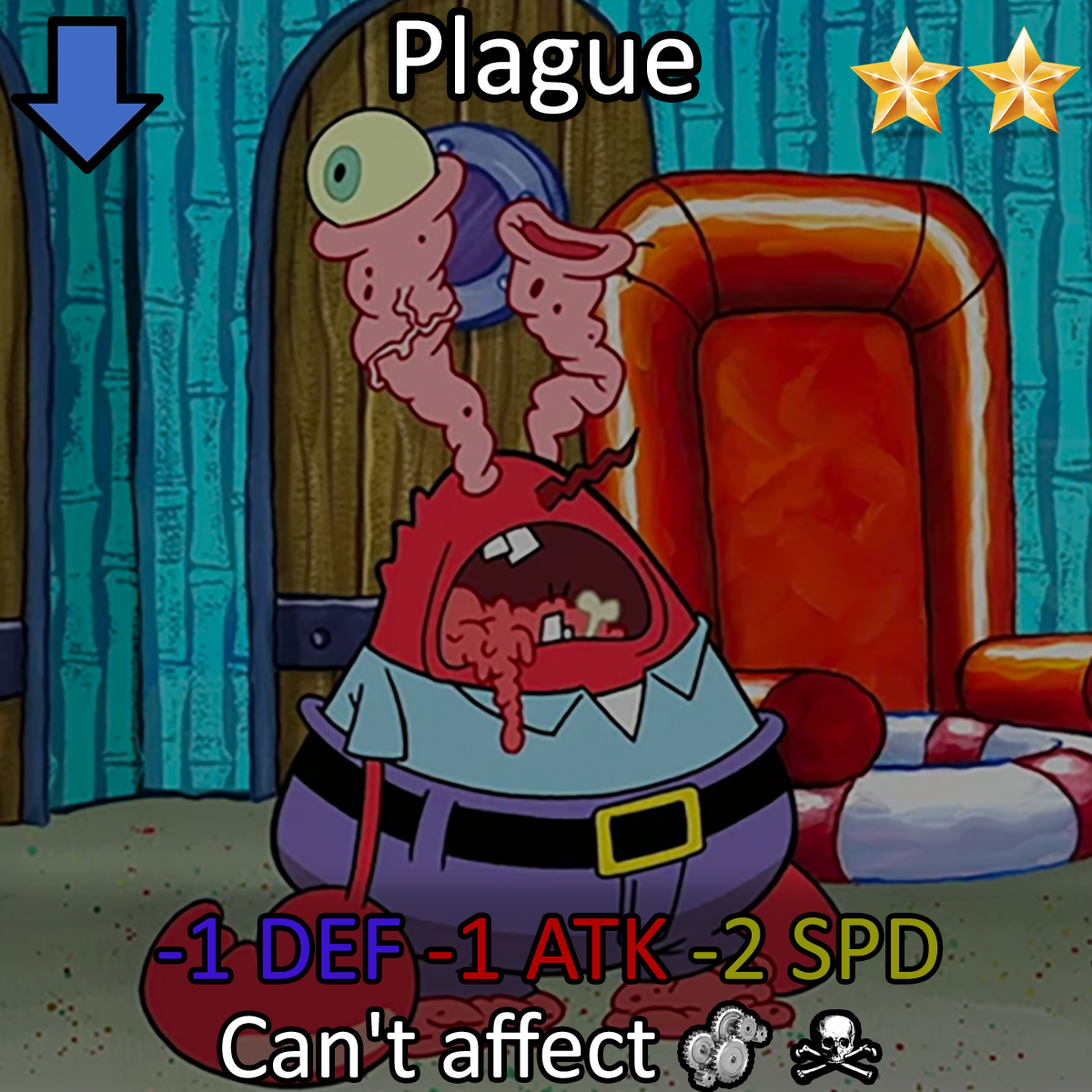
<style>
.page{position:relative;width:1092px;height:1092px}
.page>*{position:absolute;margin:0}
.t1{font:196.6px "Calibri";color:#ffffff}
.t2{font:163.8px/98.3px "Calibri";color:#ffffff}
.t3{font:163.8px/98.3px "Calibri";color:#3b13ce}
.t4{font:163.8px/98.3px "Calibri";color:#b20000}
.t5{font:163.8px/98.3px "Calibri";color:#929407}
.t6{font:142px/98.3px "stoogedings-Regular";color:#ffffff}
.t7{font:112.4px/98.3px "stoogedings-Regular";color:#ffffff}
</style>
<div class="page">
<p class="t1" style="left:397px;top:15px;width:296px;height:99px">Plague</p>
<p class="t2" style="left:158px;top:917px;width:780px;height:171px;text-align:center"><span class="t3">-1 DEF </span><span class="t4">-1 ATK </span><span class="t5">-2 SPD<br></span>Can't affect <span class="t6">[machine] </span><span class="t7">[undead]</span></p>
</div>
